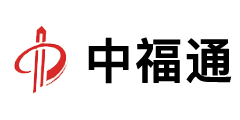
<style>
.page{position:relative;width:240px;height:120px;background:#ffffff}
.page>*{position:absolute;margin:0}
.t1{font:48px "PingFangSC-Semibold";letter-spacing:0.015em;color:#000000;font-weight:bold}
</style>
<div class="page">
<p class="t1" style="left:88px;top:37px;width:144px;height:47px">中福通</p>
</div>
